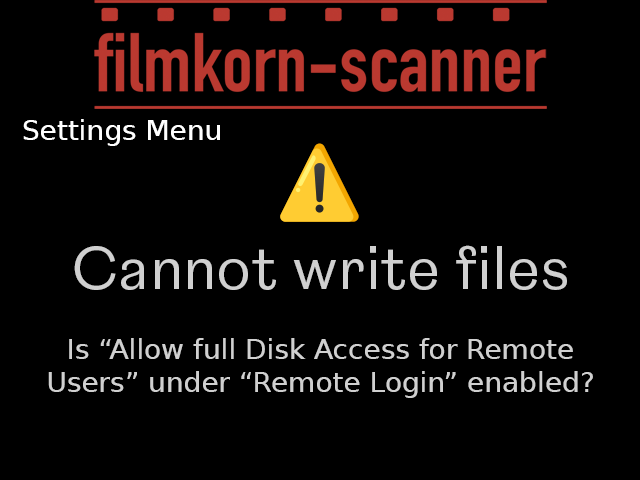
<style>
.page{position:relative;width:640px;height:480px;background:#000000}
.page>*{position:absolute;margin:0}
.t1{font:28px "DejaVuSans";color:#ffffff}
.t2{font:28px "DejaVuSans";color:#d0d0d0}
.t3{font:60px "NewReason-Regular";color:#d0d0d0}
</style>
<div class="page">
<p class="t1" style="left:23px;top:119px;width:197px;height:27px">Settings Menu</p>
<p class="t2" style="left:48px;top:245px;width:545px;height:153px;text-align:center"><span class="t3">Cannot write files<br><br></span>Is “Allow full Disk Access for Remote Users” under “Remote Login” enabled?</p>
</div>
